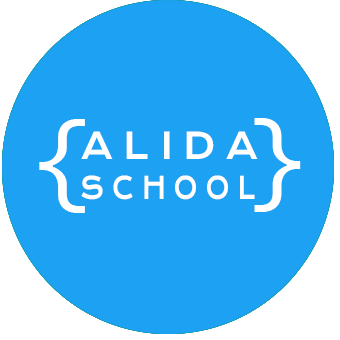
<style>
.page{position:relative;width:340px;height:340px;background:#1da1f2}
.page>*{position:absolute;margin:0}
.t1{font:36px "KronaOne-Regular";letter-spacing:0.32em;color:#ffffff;text-transform:uppercase;scale:0.97 1}
.t2{font:30.5px "KronaOne-Regular";letter-spacing:0.32em;color:#ffffff;text-transform:uppercase;scale:0.79 1}
</style>
<div class="page">
<p class="t1" style="left:81px;top:131px;width:177px;height:28px">Alida</p>
<p class="t2" style="left:81px;top:175px;width:174px;height:25px">School</p>
</div>
